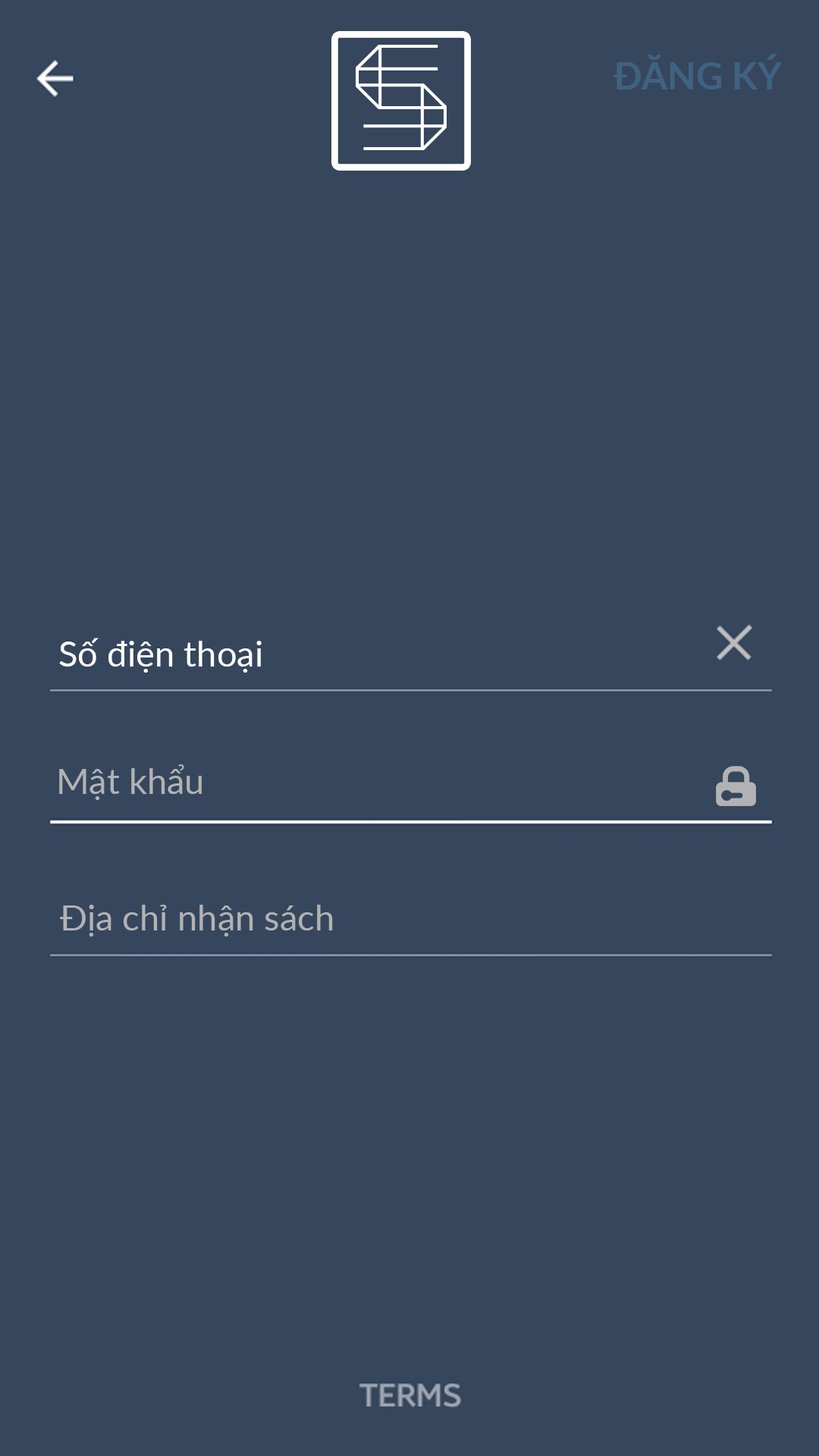
<style>
.page{position:relative;width:819px;height:1456px;background:#36465d}
.page>*{position:absolute;margin:0}
.t1{font:37.4px "Lato-Bold";color:#3f6280;text-transform:uppercase}
.t2{font:35.8px "Lato-Regular";color:#ffffff}
.t3{font:35.8px "Lato-Regular";color:#b2b2b4}
</style>
<div class="page">
<p class="t1" style="left:613px;top:54px;width:170px;height:35px">đăng ký</p>
<p class="t2" style="left:59px;top:638px;width:203px;height:35px">Số điện thoại</p>
<p class="t3" style="left:59px;top:764px;width:143px;height:36px">Mật khẩu</p>
<p class="t3" style="left:60px;top:905px;width:273px;height:32px">Địa chỉ nhận sách</p>
</div>
